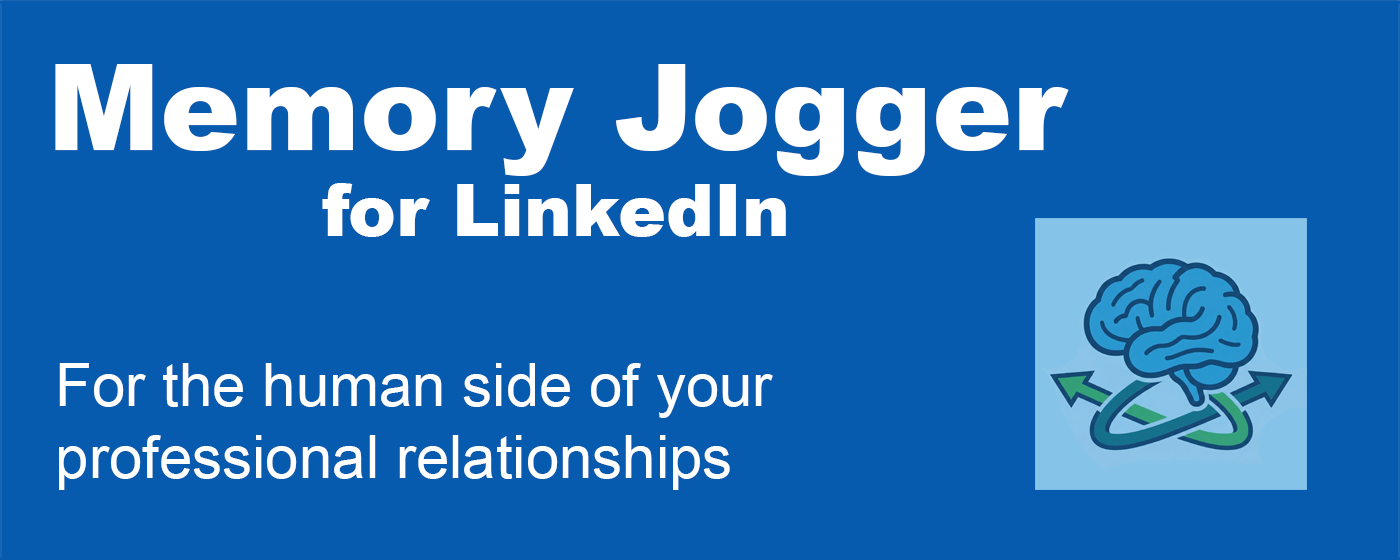
<style>
.page{position:relative;width:1400px;height:560px;background:#075baf}
.page>*{position:absolute;margin:0}
.t1{font:120px "Arial-Black";color:#ffffff}
.t2{font:72px "Arial-Black";color:#ffffff}
.t3{font:60px "ArialMT";color:#ffffff}
</style>
<div class="page">
<p class="t1" style="left:55px;top:64px;width:1014px;height:173px;text-align:center">Memory Jogger<br><span class="t2">for LinkedIn</span></p>
<p class="t3" style="left:59px;top:363px;width:714px;height:127px">For the human side of your<br>professional relationships</p>
</div>
